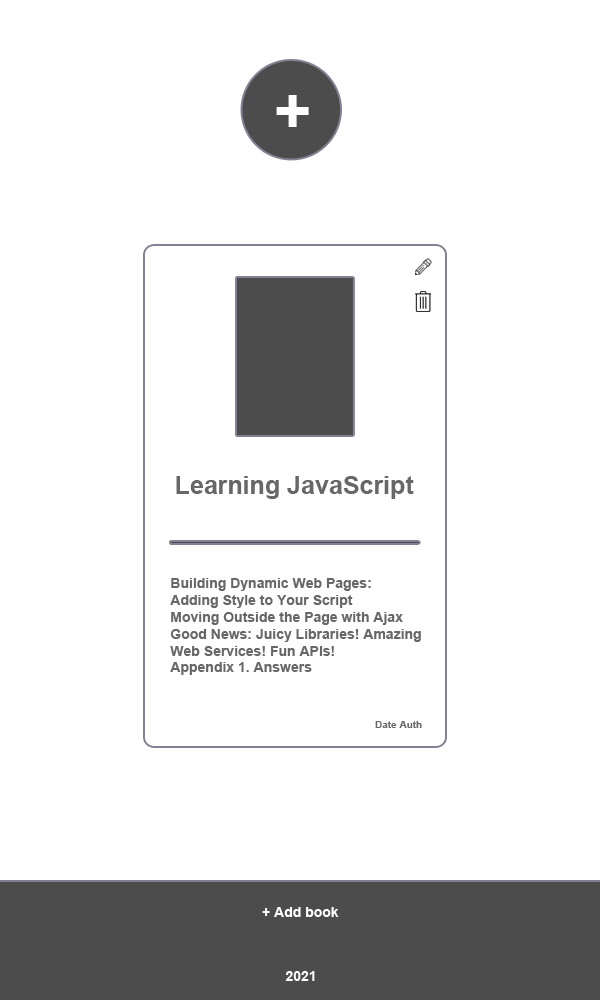
<style>
.page{position:relative;width:600px;height:1000px;background:#ffffff}
.page>*{position:absolute;margin:0}
.t1{font:64.3px "Arial-BoldMT";color:#ffffff}
.t2{font:25px "Arial-BoldMT";color:#676767}
.t3{font:14px "Arial-BoldMT";color:#676767}
.t4{font:10px "Arial-BoldMT";color:#676767}
.t5{font:14px "Arial-BoldMT";color:#ffffff}
</style>
<div class="page">
<p class="t1" style="left:276px;top:95px;width:33px;height:32px">+</p>
<p class="t2" style="left:176px;top:476px;width:238px;height:23px">Learning JavaScript</p>
<p class="t3" style="left:170px;top:578px;width:251px;height:97px">Building Dynamic Web Pages:<br>Adding Style to Your Script<br>Moving Outside the Page with Ajax<br>Good News: Juicy Libraries! Amazing<br>Web Services! Fun APIs!<br>Appendix 1. Answers</p>
<p class="t4" style="left:375px;top:721px;width:47px;height:7px">Date Auth</p>
<p class="t5" style="left:262px;top:907px;width:77px;height:10px">+ Add book</p>
<p class="t5" style="left:285px;top:971px;width:30px;height:10px">2021</p>
</div>
